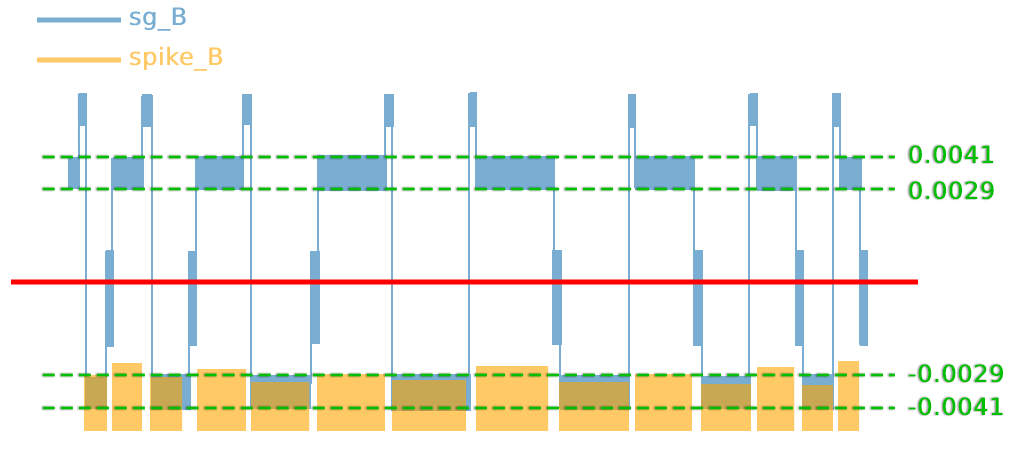
<style>
.page{position:relative;width:1032px;height:459px;background:#ffffff}
.page>*{position:absolute;margin:0}
.t1{font:24px "DejaVuSans";color:#79add2;font-weight:bold}
.t2{font:24px "DejaVuSans";color:#ffc966;font-weight:bold}
.t3{font:24px "DejaVuSans";color:#00be00;font-weight:bold}
</style>
<div class="page">
<p class="t1" style="left:129px;top:7px;width:57px;height:24px">sg_B</p>
<p class="t2" style="left:129px;top:46px;width:94px;height:25px">spike_B</p>
<p class="t3" style="left:909px;top:145px;width:85px;height:19px">0.0041</p>
<p class="t3" style="left:909px;top:181px;width:85px;height:19px">0.0029</p>
<p class="t3" style="left:908px;top:364px;width:96px;height:19px">-0.0029</p>
<p class="t3" style="left:908px;top:397px;width:95px;height:19px">-0.0041</p>
</div>
